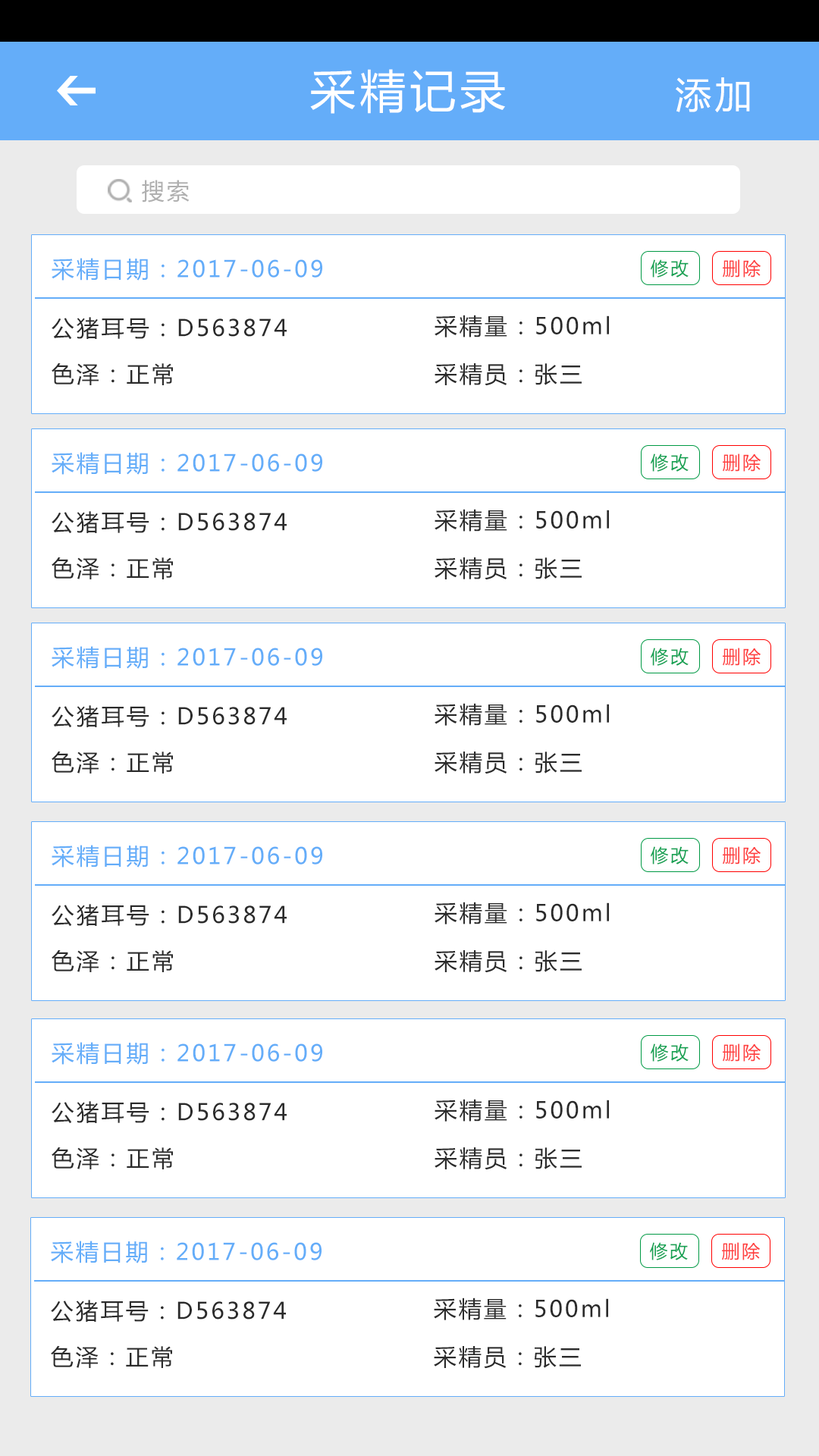
<style>
.page{position:relative;width:819px;height:1456px;background:#ffffff}
.page>*{position:absolute;margin:0}
.t1{font:45.5px "MicrosoftYaHei";letter-spacing:0.1em;color:#ffffff}
.t2{font:36.4px "MicrosoftYaHei";letter-spacing:0.1em;color:#ffffff}
.t3{font:22.7px "MicrosoftYaHei";letter-spacing:0.1em;color:#b0b0b0}
.t4{font:22.7px "MicrosoftYaHei";letter-spacing:0.1em;color:#64adf9}
.t5{font:18.2px "MicrosoftYaHei";letter-spacing:0.1em;color:#16a254}
.t6{font:18.2px "MicrosoftYaHei";letter-spacing:0.1em;color:#ff3f3f}
.t7{font:22.7px "MicrosoftYaHei";letter-spacing:0.1em;color:#2b2b2b}
</style>
<div class="page">
<p class="t1" style="left:310px;top:69px;width:195px;height:45px">采精记录</p>
<p class="t2" style="left:676px;top:77px;width:74px;height:35px">添加</p>
<p class="t3" style="left:142px;top:180px;width:48px;height:22px">搜索</p>
<p class="t4" style="left:52px;top:258px;width:270px;height:23px">采精日期：2017-06-09</p>
<p class="t5" style="left:651px;top:259px;width:38px;height:19px">修改</p>
<p class="t6" style="left:723px;top:259px;width:38px;height:19px">删除</p>
<p class="t7" style="left:52px;top:317px;width:235px;height:23px">公猪耳号：D563874</p>
<p class="t7" style="left:435px;top:315px;width:174px;height:22px">采精量：500ml</p>
<p class="t7" style="left:52px;top:362px;width:121px;height:23px">色泽：正常</p>
<p class="t7" style="left:435px;top:363px;width:147px;height:23px">采精员：张三</p>
<p class="t4" style="left:52px;top:452px;width:270px;height:23px">采精日期：2017-06-09</p>
<p class="t5" style="left:651px;top:453px;width:38px;height:19px">修改</p>
<p class="t6" style="left:723px;top:453px;width:38px;height:19px">删除</p>
<p class="t7" style="left:435px;top:509px;width:174px;height:23px">采精量：500ml</p>
<p class="t7" style="left:52px;top:511px;width:235px;height:23px">公猪耳号：D563874</p>
<p class="t7" style="left:52px;top:557px;width:121px;height:22px">色泽：正常</p>
<p class="t7" style="left:435px;top:557px;width:147px;height:23px">采精员：张三</p>
<p class="t4" style="left:52px;top:646px;width:270px;height:23px">采精日期：2017-06-09</p>
<p class="t5" style="left:651px;top:648px;width:38px;height:18px">修改</p>
<p class="t6" style="left:723px;top:648px;width:38px;height:18px">删除</p>
<p class="t7" style="left:52px;top:705px;width:235px;height:23px">公猪耳号：D563874</p>
<p class="t7" style="left:435px;top:703px;width:174px;height:23px">采精量：500ml</p>
<p class="t7" style="left:52px;top:751px;width:121px;height:22px">色泽：正常</p>
<p class="t7" style="left:435px;top:751px;width:147px;height:23px">采精员：张三</p>
<p class="t4" style="left:52px;top:845px;width:270px;height:23px">采精日期：2017-06-09</p>
<p class="t5" style="left:651px;top:846px;width:38px;height:18px">修改</p>
<p class="t6" style="left:723px;top:846px;width:38px;height:18px">删除</p>
<p class="t7" style="left:52px;top:904px;width:235px;height:23px">公猪耳号：D563874</p>
<p class="t7" style="left:435px;top:902px;width:174px;height:22px">采精量：500ml</p>
<p class="t7" style="left:52px;top:949px;width:121px;height:23px">色泽：正常</p>
<p class="t7" style="left:435px;top:950px;width:147px;height:23px">采精员：张三</p>
<p class="t4" style="left:52px;top:1042px;width:270px;height:23px">采精日期：2017-06-09</p>
<p class="t5" style="left:651px;top:1043px;width:38px;height:19px">修改</p>
<p class="t6" style="left:723px;top:1043px;width:38px;height:19px">删除</p>
<p class="t7" style="left:52px;top:1101px;width:235px;height:23px">公猪耳号：D563874</p>
<p class="t7" style="left:435px;top:1099px;width:174px;height:23px">采精量：500ml</p>
<p class="t7" style="left:52px;top:1147px;width:121px;height:22px">色泽：正常</p>
<p class="t7" style="left:435px;top:1147px;width:147px;height:23px">采精员：张三</p>
<p class="t4" style="left:51px;top:1241px;width:271px;height:22px">采精日期：2017-06-09</p>
<p class="t5" style="left:650px;top:1242px;width:38px;height:18px">修改</p>
<p class="t6" style="left:722px;top:1242px;width:38px;height:18px">删除</p>
<p class="t7" style="left:51px;top:1300px;width:235px;height:23px">公猪耳号：D563874</p>
<p class="t7" style="left:434px;top:1297px;width:174px;height:23px">采精量：500ml</p>
<p class="t7" style="left:51px;top:1345px;width:121px;height:23px">色泽：正常</p>
<p class="t7" style="left:434px;top:1346px;width:147px;height:23px">采精员：张三</p>
</div>
